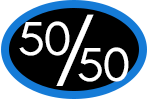
<style>
.page{position:relative;width:150px;height:103px;background:#000000}
.page>*{position:absolute;margin:0}
.t1{font:75px "GlacialIndifference-Regular";letter-spacing:-0.05em;color:#ffffff;scale:1.07 1}
.t2{font:48.5px "GlacialIndifference-Regular";letter-spacing:-0.05em;color:#ffffff;scale:1.07 1}
</style>
<div class="page">
<p class="t1" style="left:56px;top:14px;width:38px;height:72px">/</p>
<p class="t2" style="left:19px;top:21px;width:51px;height:35px">50</p>
<p class="t2" style="left:78px;top:47px;width:51px;height:35px">50</p>
</div>
